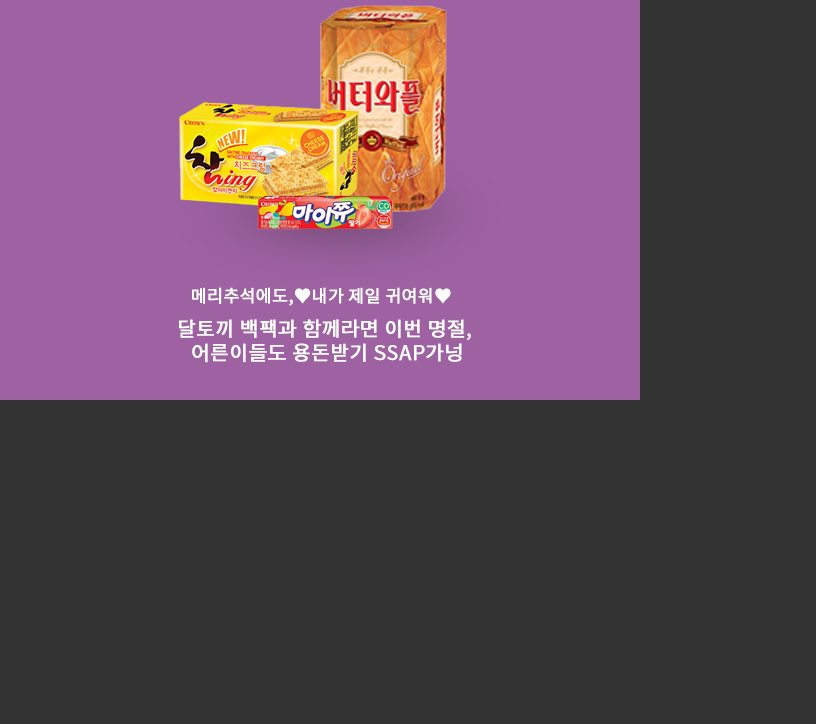
<style>
.page{position:relative;width:816px;height:724px;background:#333333}
.page>*{position:absolute;margin:0}
.t1{font:17px "NotoSansKR-Regular";letter-spacing:0.01em;color:#ffffff;font-weight:bold}
.t2{font:20px "NotoSansKR-Regular";letter-spacing:0.01em;color:#ffffff;font-weight:bold}
</style>
<div class="page">
<p class="t1" style="left:192px;top:287px;width:259px;height:19px">메리추석에도,♥️내가 제일 귀여워♥️</p>
<p class="t2" style="left:179px;top:319px;width:292px;height:44px;text-align:center">달토끼 백팩과 함께라면 이번 명절, <br>어른이들도 용돈받기 SSAP가넝</p>
</div>
